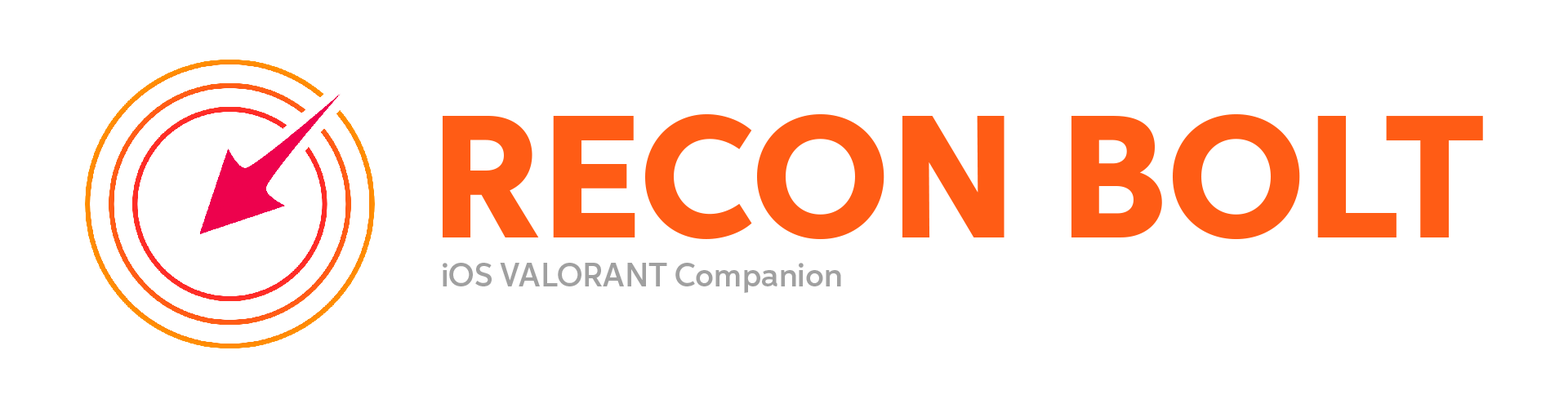
<style>
.page{position:relative;width:1568px;height:408px;background:#ffffff}
.page>*{position:absolute;margin:0}
.t1{font:175.1px "Aspira-Heavy";color:#ff5c15}
.t2{font:32.7px "Aspira-Demi";color:#a0a0a0}
</style>
<div class="page">
<p class="t1" style="left:443px;top:114px;width:1040px;height:126px">RECON BOLT</p>
<p class="t2" style="left:443px;top:263px;width:398px;height:30px">iOS VALORANT Companion</p>
</div>
